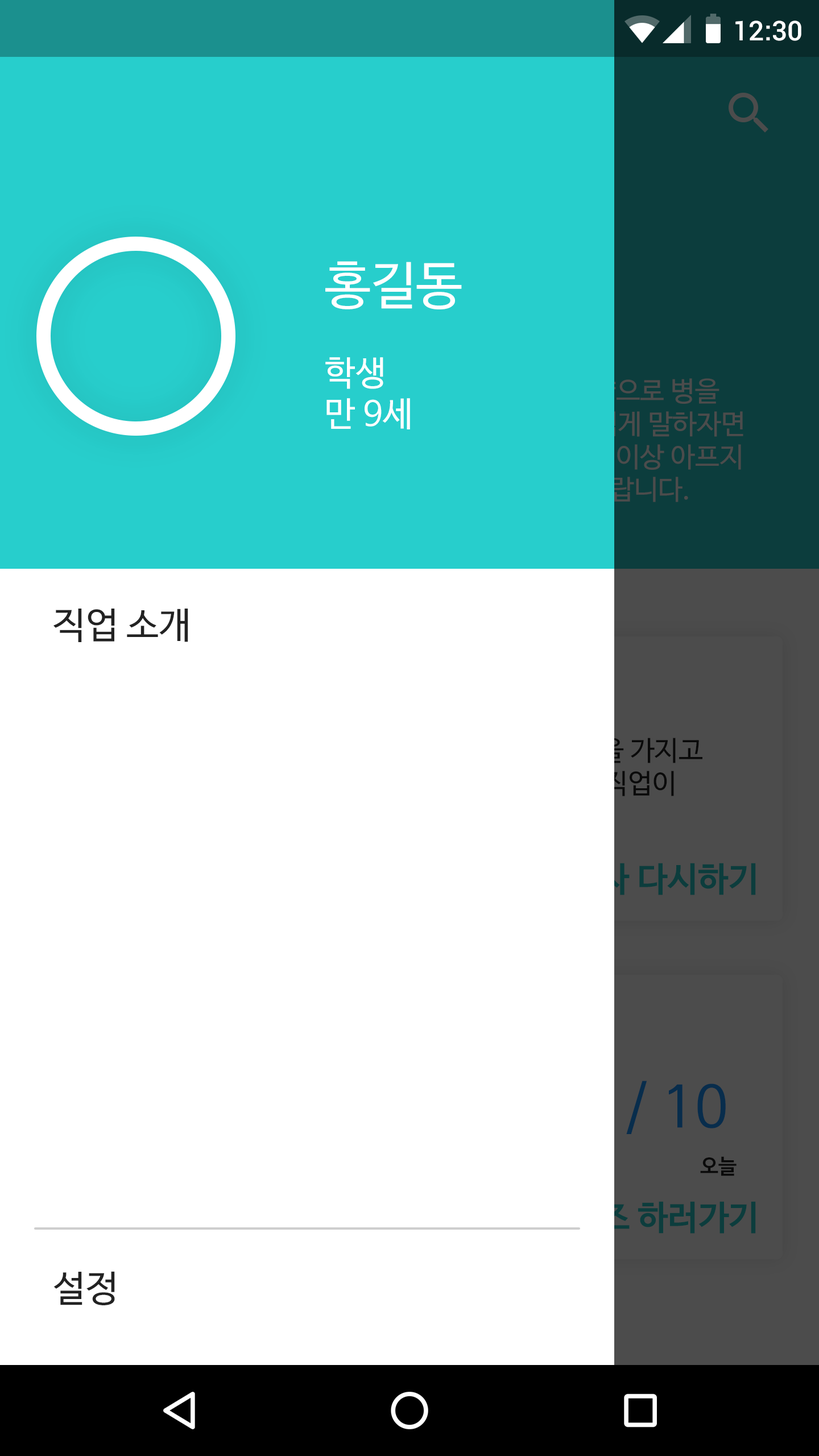
<style>
.page{position:relative;width:819px;height:1456px;background:#ffffff}
.page>*{position:absolute;margin:0}
.t1{font:27.3px "Roboto-Medium";color:#ffffff}
.t2{font:34.1px "NanumBarunGothic";color:#ffffff}
.t3{font:51.2px "NanumBarunGothic";color:#ffffff}
.t4{font:36.4px "NanumBarunGothic";color:#222222}
.t5{font:20.5px "NanumBarunGothicBold";color:#222222}
</style>
<div class="page">
<p class="t1" style="left:735px;top:20px;width:66px;height:21px">12:30</p>
<p class="t2" style="left:325px;top:261px;width:137px;height:168px"><span class="t3">홍길동<br></span><br>학생<br>만 9세</p>
<p class="t4" style="left:53px;top:609px;width:135px;height:33px">직업 소개</p>
<p class="t5" style="left:700px;top:1156px;width:37px;height:20px">오늘</p>
<p class="t4" style="left:53px;top:1271px;width:62px;height:34px">설정</p>
</div>
